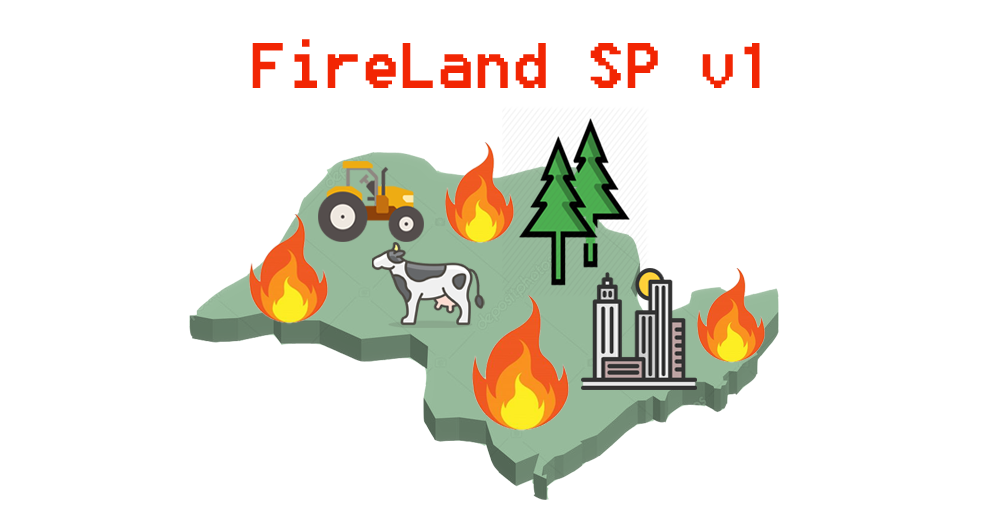
<style>
.page{position:relative;width:981px;height:530px;background:#ffffff}
.page>*{position:absolute;margin:0}
.t1{font:80px "8514oem";color:#f22503}
</style>
<div class="page">
<p class="t1" style="left:252px;top:39px;width:508px;height:49px">FireLand SP v1</p>
</div>
